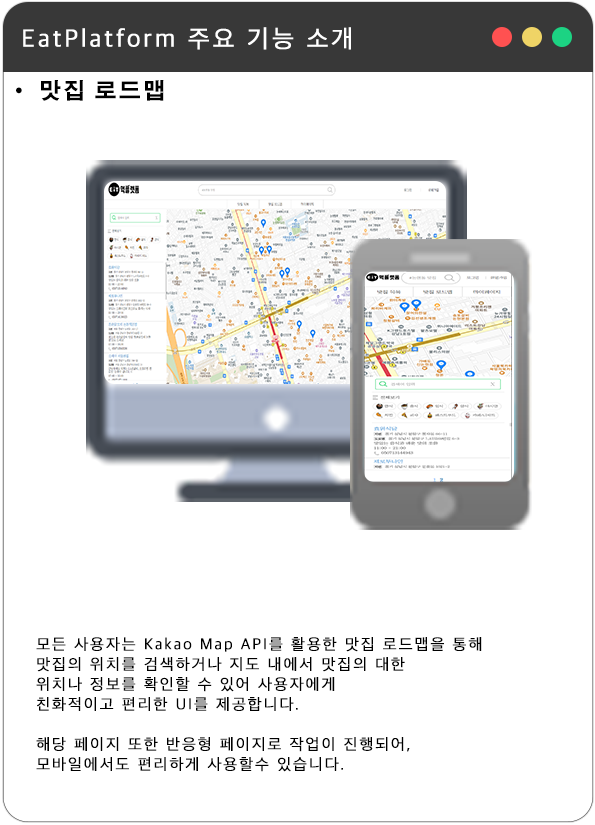
<style>
.page{position:relative;width:595px;height:825px;background:#ffffff}
.page>*{position:absolute;margin:0}
.t1{font:25px "AppleSDGothicNeoL00";letter-spacing:0.1em;color:#ffffff;font-weight:bold}
.t2{font:25px "AppleSDGothicNeoL00";letter-spacing:0.1em;color:#ffffff;font-variant:small-caps;font-weight:bold}
.t3{font:22px "AdobeGothicStd-Bold";letter-spacing:0.1em;color:#000000}
.t4{font:16px/20px "AppleSDGothicNeoL00";letter-spacing:0.1em;color:#000000;font-weight:bold}
</style>
<div class="page">
<p class="t1" style="left:23px;top:27px;width:328px;height:23px"><span class="t2">E</span>atPlatform 주요 기능 소개</p>
<p class="t3" style="left:16px;top:80px;width:148px;height:21px">· 맛집 로드맵</p>
<p class="t4" style="left:36px;top:637px;width:446px;height:135px">모든 사용자는 Kakao Map API를 활용한 맛집 로드맵을 통해 <br>맛집의 위치를 검색하거나 지도 내에서 맛집의 대한 <br>위치나 정보를 확인할 수 있어 사용자에게 <br>친화적이고 편리한 UI를 제공합니다.<br><br>해당 페이지 또한 반응형 페이지로 작업이 진행되어,<br>모바일에서도 편리하게 사용할수 있습니다.</p>
</div>
